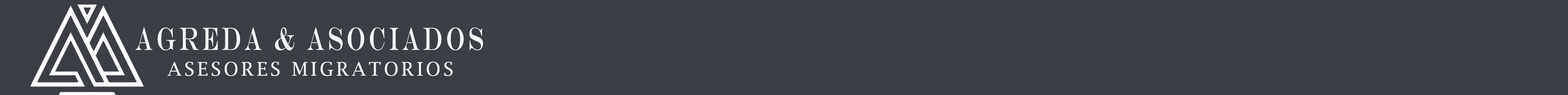
<style>
.page{position:relative;width:1568px;height:95px;background:#3b3e45}
.page>*{position:absolute;margin:0}
.t1{font:32.2px "EngraversMT";letter-spacing:0.15em;color:#f7f9fb;scale:0.62 1}
.t2{font:18.8px "LucidaBright";letter-spacing:0.15em;color:#f7f9fb}
</style>
<div class="page">
<p class="t1" style="left:136px;top:27px;width:347px;height:24px">AGREDA &amp; ASOCIADOS</p>
<p class="t2" style="left:167px;top:62px;width:286px;height:14px">ASESORES MIGRATORIOS</p>
</div>
